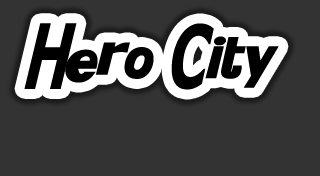
<style>
.page{position:relative;width:320px;height:176px;background:#333333}
.page>*{position:absolute;margin:0}
.t1{font:55px "KittyKatt";color:#000000}
</style>
<div class="page">
<p class="t1" style="left:24px;top:23px;width:255px;height:67px">Hero City</p>
</div>
